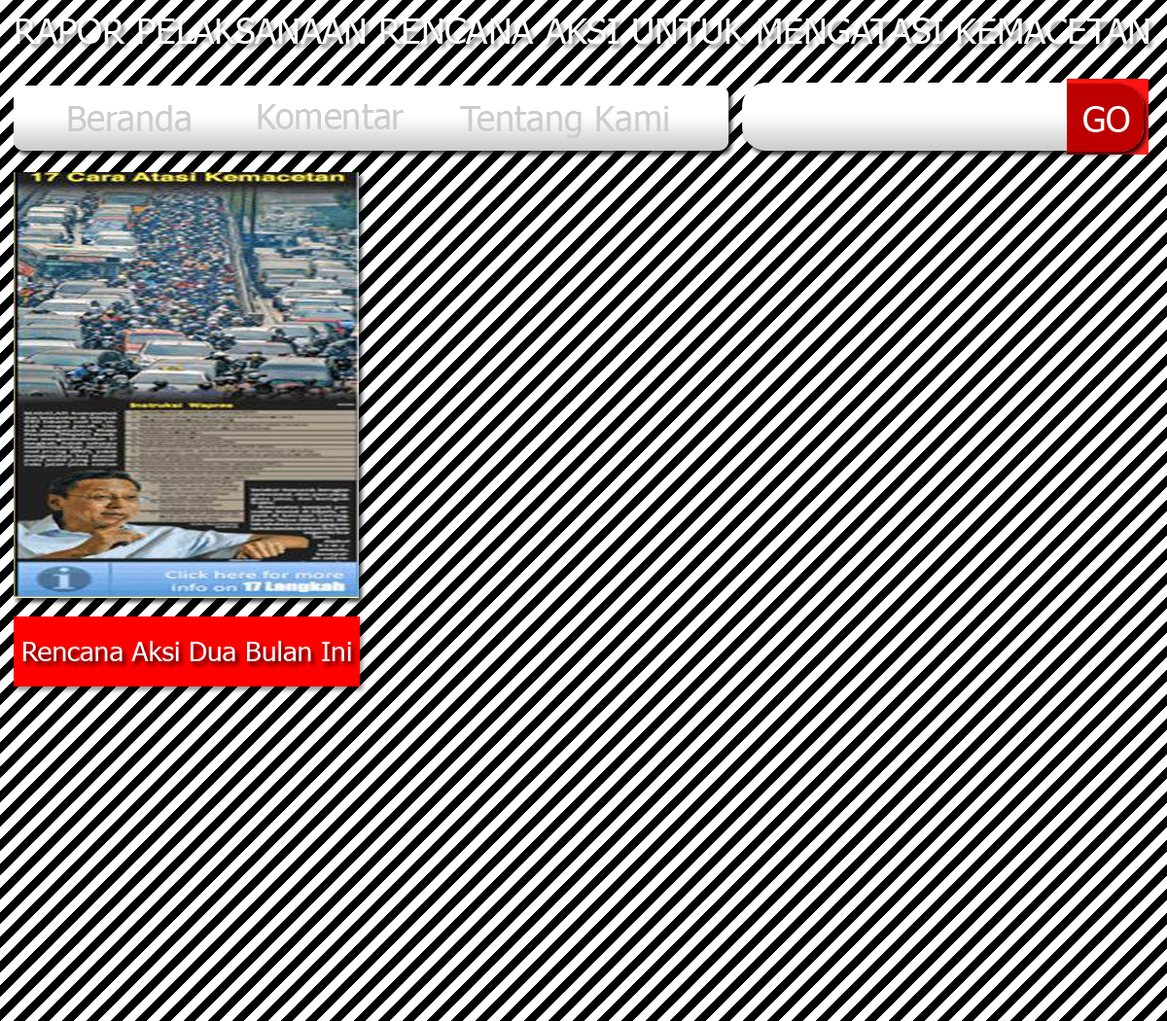
<style>
.page{position:relative;width:1167px;height:1021px;background:#ffffff}
.page>*{position:absolute;margin:0}
.t1{font:35px "Tahoma";color:#ffffff}
.t2{font:35px "Tahoma";color:#cccccc}
.t3{font:27.2px "Tahoma";color:#ffffff}
</style>
<div class="page">
<p class="t1" style="left:16px;top:18px;width:1133px;height:26px">RAPOR PELAKSANAAN RENCANA AKSI UNTUK MENGATASI KEMACETAN</p>
<p class="t2" style="left:68px;top:105px;width:123px;height:26px">Beranda</p>
<p class="t2" style="left:258px;top:104px;width:146px;height:25px">Komentar</p>
<p class="t2" style="left:460px;top:106px;width:208px;height:32px">Tentang Kami</p>
<p class="t1" style="left:1084px;top:106px;width:46px;height:26px">GO</p>
<p class="t3" style="left:23px;top:641px;width:328px;height:21px">Rencana Aksi Dua Bulan Ini</p>
</div>
